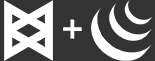
<style>
.page{position:relative;width:155px;height:61px;background:#333333}
.page>*{position:absolute;margin:0}
.t1{font:38.1px "Lato-Bold";letter-spacing:0.05em;color:#ffffff}
</style>
<div class="page">
<p class="t1" style="left:63px;top:19px;width:19px;height:20px;rotate:1deg">+</p>
</div>
